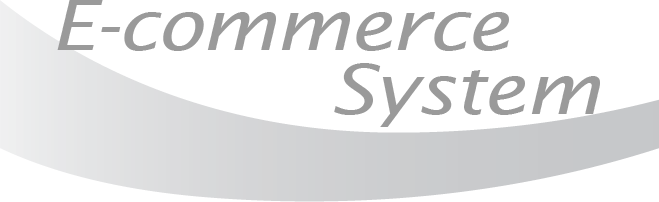
<style>
.page{position:relative;width:659px;height:202px;background:#ffffff}
.page>*{position:absolute;margin:0}
.t1{font:69.3px/64px "LucidaSans-Italic";letter-spacing:-0.025em;color:#9a9a9a;scale:1.18 1}
</style>
<div class="page">
<p class="t1" style="left:57px;top:0px;width:543px;height:127px;text-align:center">E-commerce<br>  System</p>
</div>
